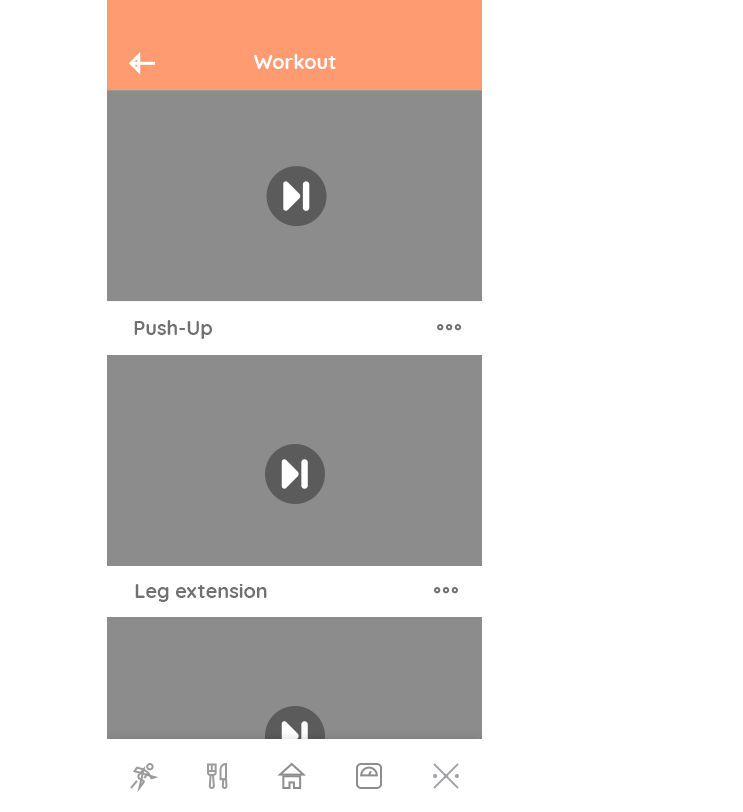
<style>
.page{position:relative;width:743px;height:812px;background:#ffffff}
.page>*{position:absolute;margin:0}
.t1{font:20px "Quicksand-Bold";color:#ffffff}
.t2{font:20px "Quicksand-Bold";color:#707070}
</style>
<div class="page">
<p class="t1" style="left:254px;top:54px;width:82px;height:15px">Workout</p>
<p class="t2" style="left:134px;top:320px;width:78px;height:19px">Push-Up</p>
<p class="t2" style="left:135px;top:584px;width:132px;height:18px">Leg extension</p>
</div>
